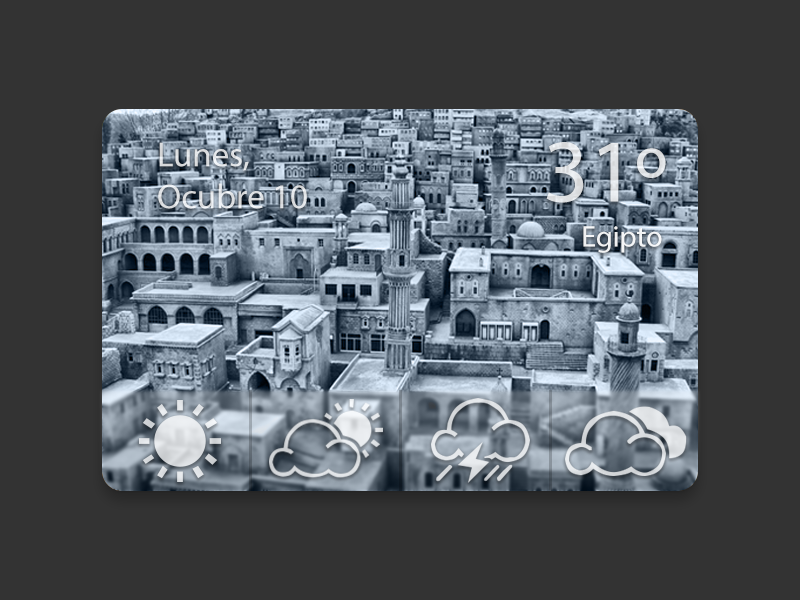
<style>
.page{position:relative;width:800px;height:600px;background:#333333}
.page>*{position:absolute;margin:0}
.t1{font:35px "MyriadPro-Regular";color:#dee1e4}
.t2{font:90.2px "MyriadPro-Regular";color:#dfe2e4}
.t3{font:30px "MyriadPro-Regular";color:#ffffff}
</style>
<div class="page">
<p class="t1" style="left:158px;top:142px;width:149px;height:67px">Lunes,<br>Ocubre 10</p>
<p class="t2" style="left:546px;top:142px;width:120px;height:61px">31º</p>
<p class="t3" style="left:583px;top:226px;width:79px;height:27px;opacity:0.9">Egipto</p>
</div>
